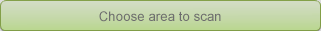
<style>
.page{position:relative;width:321px;height:31px}
.page>*{position:absolute;margin:0}
.t1{font:13.3px "ArialMT";color:#6e6e6e}
</style>
<div class="page">
<p class="t1" style="left:99px;top:11px;width:122px;height:11px">Choose area to scan</p>
</div>
